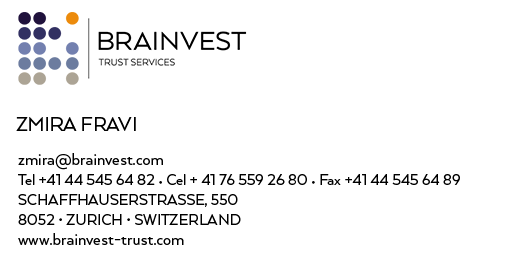
<style>
.page{position:relative;width:531px;height:260px;background:#ffffff}
.page>*{position:absolute;margin:0}
.t1{font:22px "Arquitecta";color:#000000;text-transform:uppercase}
.t2{font:17px/20px "Arquitecta";letter-spacing:-0.005em;color:#000000}
.t3{font:18px/20px "Arquitecta";letter-spacing:0.01em;color:#000000}
.t4{font:17px/20px "Arquitecta";letter-spacing:-0.005em;color:#000000;text-transform:uppercase}
</style>
<div class="page">
<p class="t1" style="left:16px;top:117px;width:120px;height:14px">Zmira Fravi</p>
<p class="t2" style="left:18px;top:153px;width:442px;height:92px"><span class="t3">zmira@brainvest.com<br></span>Tel +41 44 545 64 82 • Cel + 41 76 559 26 80 • Fax +41 44 545 64 89<br><span class="t4">Schaffhauserstrasse, 550<br>8052 • Zurich • SwitzerlanD<br></span><span class="t3">www.brainvest-trust.com</span></p>
</div>
